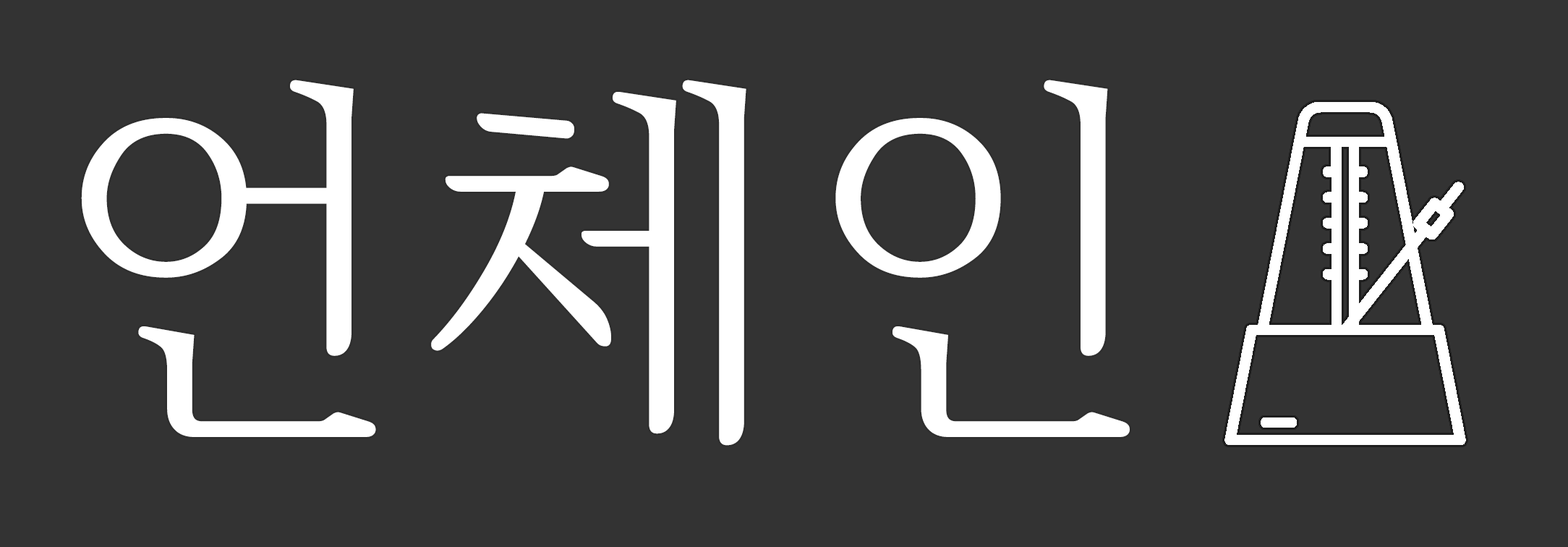
<style>
.page{position:relative;width:1568px;height:547px;background:#333333}
.page>*{position:absolute;margin:0}
.t1{font:388.7px "HCRBatang";color:#ffffff}
</style>
<div class="page">
<p class="t1" style="left:81px;top:80px;width:1049px;height:366px">언체인</p>
</div>
